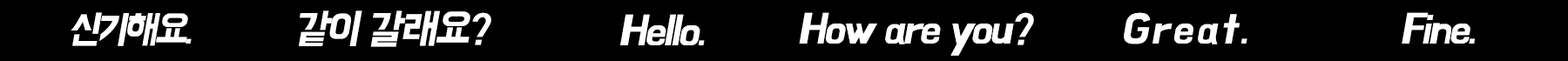
<style>
.page{position:relative;width:1568px;height:61px;background:#000000}
.page>*{position:absolute;margin:0}
.t1{font:39.2px "BMHANNA11yrsold";letter-spacing:-0.08em;color:#ffffff;font-style:italic}
.t2{font:41.8px "BMHANNA11yrsold";letter-spacing:-0.06em;color:#ffffff;font-style:italic}
.t3{font:41.8px "BMHANNA11yrsold";letter-spacing:0.06em;color:#ffffff;font-style:italic}
</style>
<div class="page">
<p class="t1" style="left:71px;top:12px;width:121px;height:34px">신기해요.</p>
<p class="t2" style="left:299px;top:10px;width:192px;height:37px">같이 갈래요?</p>
<p class="t2" style="left:620px;top:14px;width:85px;height:31px">Hello.</p>
<p class="t2" style="left:799px;top:12px;width:235px;height:44px">How are you?</p>
<p class="t3" style="left:1124px;top:12px;width:123px;height:32px">Great.</p>
<p class="t2" style="left:1402px;top:12px;width:73px;height:32px">Fine.</p>
</div>
